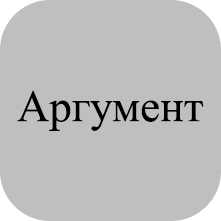
<style>
.page{position:relative;width:221px;height:221px;background:#bfbfbf}
.page>*{position:absolute;margin:0}
.t1{font:44.7px "TimesNewRomanPSMT";color:#000000}
</style>
<div class="page">
<p class="t1" style="left:17px;top:90px;width:187px;height:41px">Аргумент</p>
</div>
